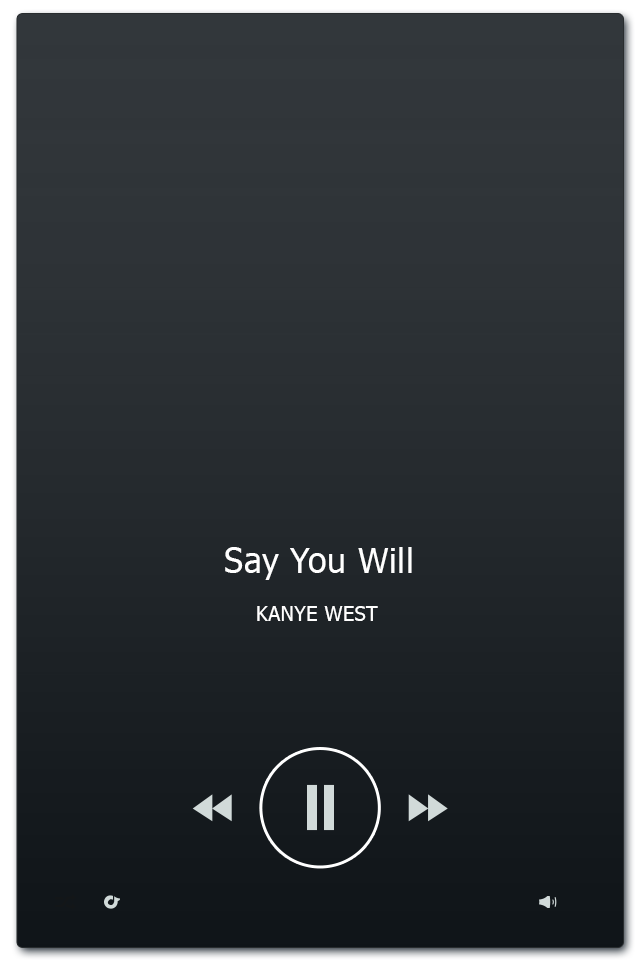
<style>
.page{position:relative;width:640px;height:960px}
.page>*{position:absolute;margin:0}
.t1{font:33.6px "Tahoma";letter-spacing:0.02em;color:#ffffff}
.t2{font:20px "Tahoma";letter-spacing:0.02em;color:#ffffff}
</style>
<div class="page">
<p class="t1" style="left:225px;top:547px;width:187px;height:33px">Say You Will</p>
<p class="t2" style="left:257px;top:606px;width:121px;height:15px">KANYE WEST</p>
</div>
